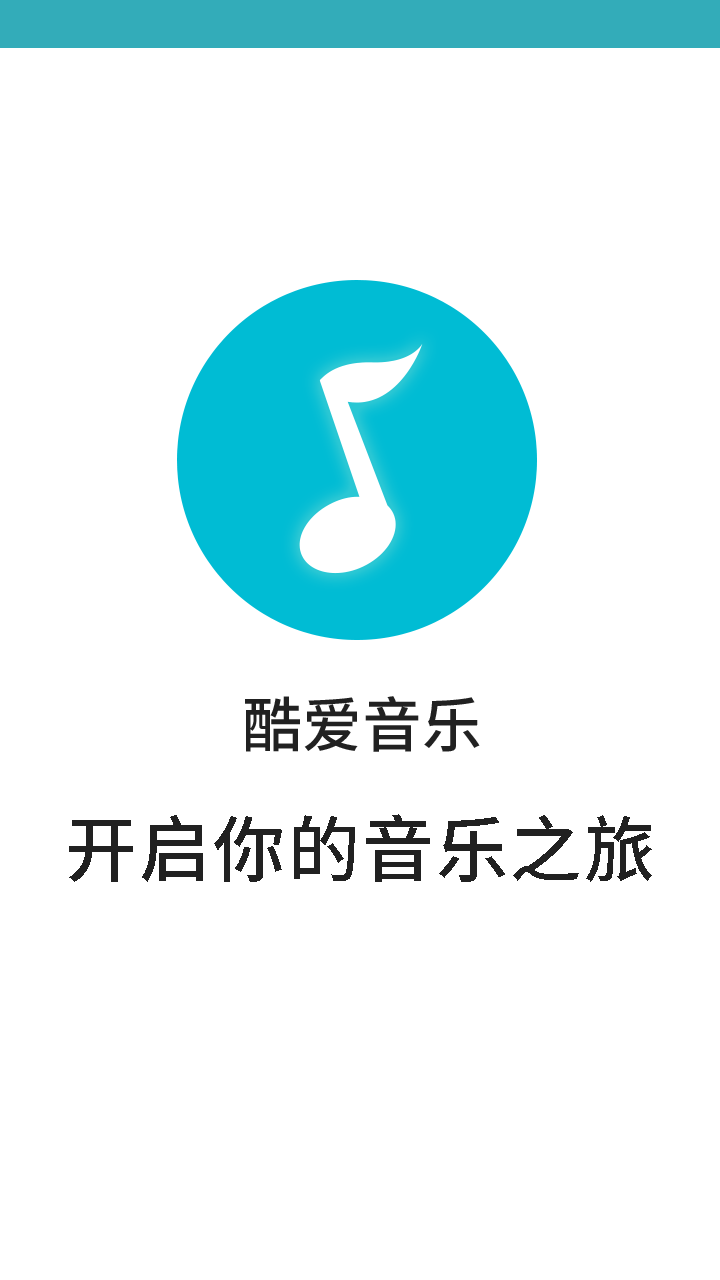
<style>
.page{position:relative;width:720px;height:1280px;background:#ffffff}
.page>*{position:absolute;margin:0}
.t1{font:60px "SourceHanSansCN-Medium";color:#212121}
.t2{font:72px "SourceHanSansCN-Medium";letter-spacing:0.03em;color:#212121}
</style>
<div class="page">
<p class="t1" style="left:245px;top:696px;width:235px;height:56px">酷爱音乐</p>
<p class="t2" style="left:69px;top:814px;width:583px;height:68px">开启你的音乐之旅</p>
</div>
